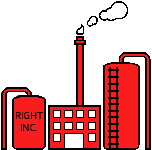
<style>
.page{position:relative;width:152px;height:150px;background:#ffffff}
.page>*{position:absolute;margin:0}
.t1{font:10px "Corbel";color:#000000}
</style>
<div class="page">
<p class="t1" style="left:16px;top:112px;width:27px;height:19px;text-align:center">RIGHT<br>INC.</p>
</div>
